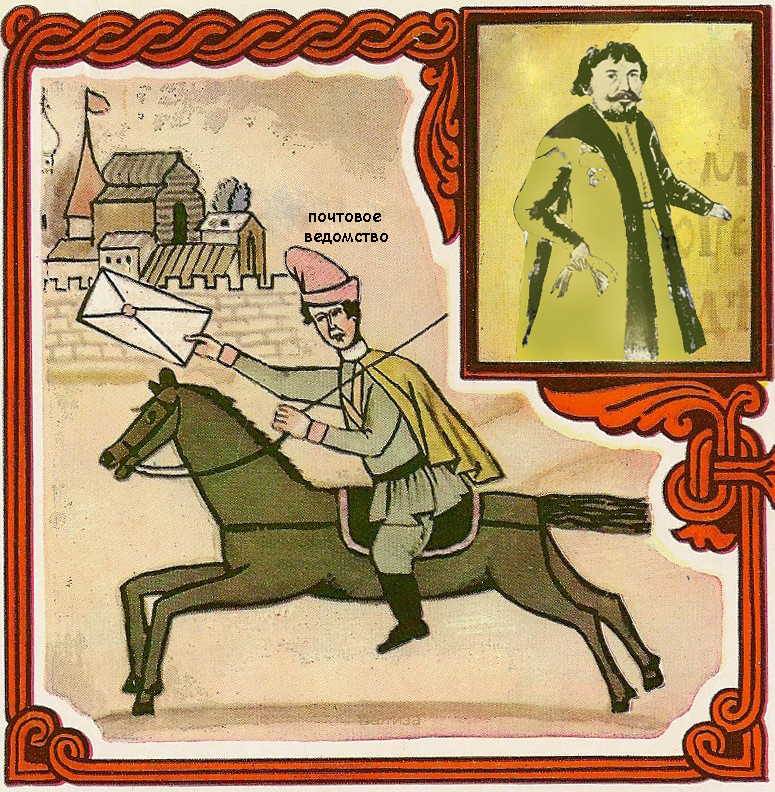
<style>
.page{position:relative;width:775px;height:792px}
.page>*{position:absolute;margin:0}
.t1{font:16.7px "ComicSansMS";color:#000000}
.t2{font:16.7px "Montserrat-Medium";color:#b49060}
</style>
<div class="page">
<p class="t1" style="left:305px;top:213px;width:83px;height:31px;text-align:center">почтовое <br>ведомство</p>
<p class="t2" style="left:360px;top:713px;width:60px;height:12px">Вализа</p>
</div>
